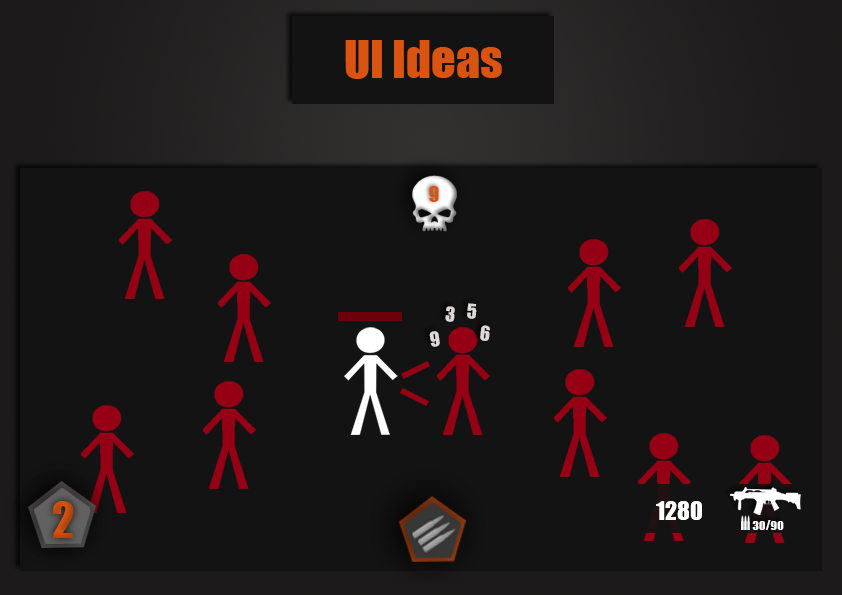
<style>
.page{position:relative;width:842px;height:595px;background:#131313}
.page>*{position:absolute;margin:0}
.t1{font:48px "Impact";color:#d95311}
.t2{font:20.2px "Impact";color:#d95311}
.t3{font:18.7px "Impact";color:#e0d8d8}
.t4{font:45.9px "Impact";color:#c34b0f}
.t5{font:24.5px "Impact";color:#ffffff}
.t6{font:12.3px "Impact";color:#ffffff}
</style>
<div class="page">
<p class="t1" style="left:345px;top:40px;width:157px;height:39px">UI Ideas</p>
<p class="t2" style="left:429px;top:186px;width:10px;height:16px">9</p>
<p class="t3" style="left:467px;top:303px;width:10px;height:16px;rotate:5deg">5</p>
<p class="t3" style="left:445px;top:306px;width:10px;height:16px;rotate:5deg">3</p>
<p class="t3" style="left:480px;top:325px;width:10px;height:16px;rotate:6deg">6</p>
<p class="t3" style="left:429px;top:331px;width:11px;height:16px;rotate:-8deg">9</p>
<p class="t4" style="left:53px;top:501px;width:21px;height:37px">2</p>
<p class="t5" style="left:656px;top:501px;width:46px;height:19px">1280</p>
<p class="t6" style="left:752px;top:520px;width:32px;height:10px">30/90</p>
</div>
